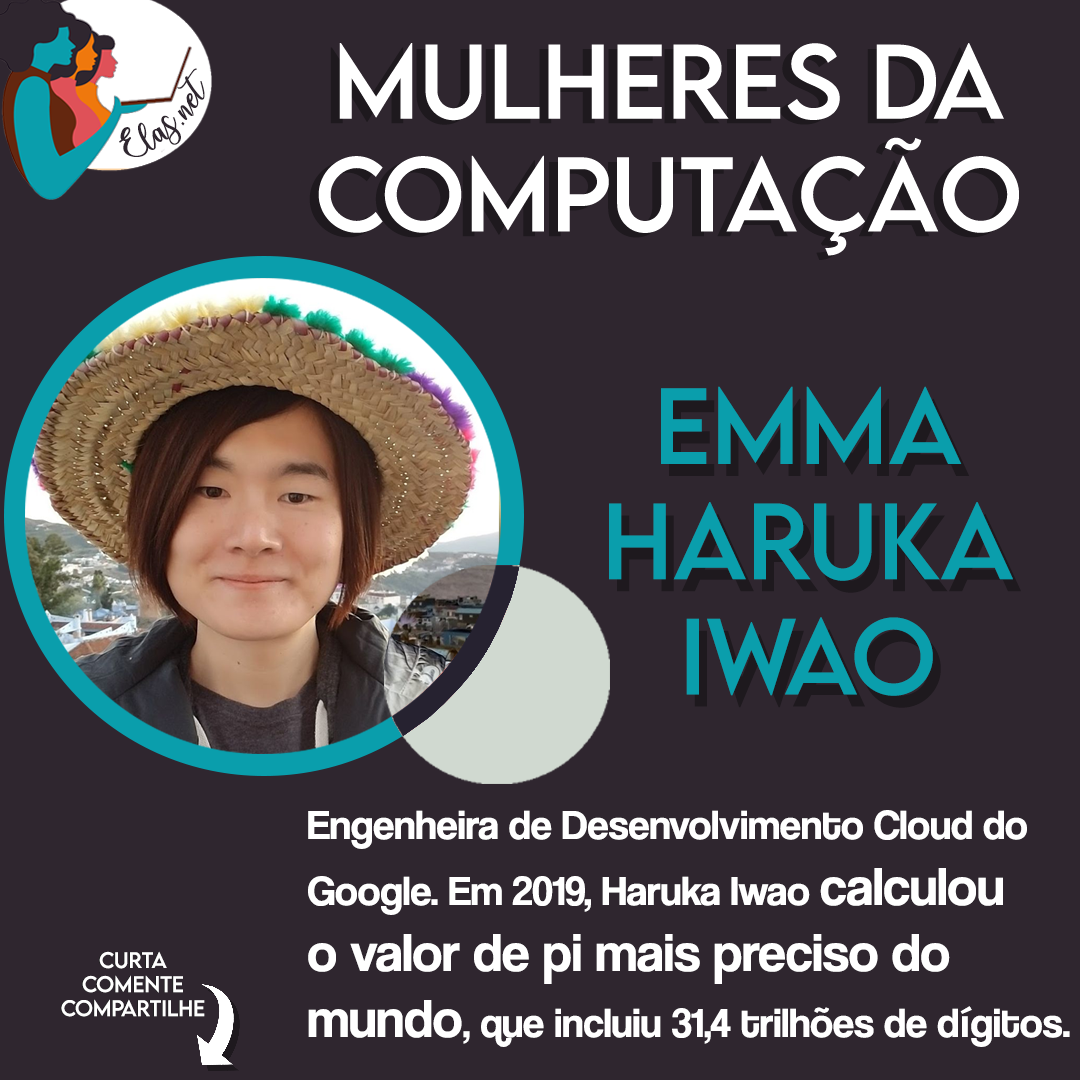
<style>
.page{position:relative;width:1080px;height:1080px;background:#2f262f}
.page>*{position:absolute;margin:0}
.t1{font:25px "charlinda-Regular";color:#2f262f;scale:1.18 1}
.t2{font:96px "LEMONMILK-Regular";color:#0a9eac}
.t3{font:96px "LEMONMILK-Regular";color:#1e191e}
.t4{font:42px "CoolveticaRg-Regular";color:#ffffff}
.t5{font:55px "CoolveticaRg-Regular";color:#ffffff}
.t6{font:20px "LEMONMILK-Regular"}
.t7{font:20px "LEMONMILK-Regular";color:#ffffff}
</style>
<div class="page">
<p class="t1" style="left:119px;top:68px;width:86px;height:89px;rotate:-43deg">Elas.net</p>
<p class="t2" style="left:609px;top:386px;width:404px;height:310px;text-align:center">Emma<br>Haruka<br>Iwao</p>
<p class="t3" style="left:617px;top:398px;width:404px;height:310px;text-align:center">Emma<br>Haruka<br>Iwao</p>
<p class="t4" style="left:308px;top:810px;width:762px;height:237px">Engenheira de Desenvolvimento Cloud do <br>Google. Em 2019, Haruka Iwao <span class="t5">calculou <br>o valor de pi mais preciso do <br>mundo</span>, que incluiu 31,4 trilhões de dígitos.</p>
<p class="t6" style="left:60px;top:951px;width:144px;height:66px;text-align:center">Curta<br>Comente<br>Compartilhe</p>
<p class="t7" style="left:61px;top:951px;width:144px;height:66px;text-align:center">Curta<br>Comente<br>Compartilhe</p>
</div>
